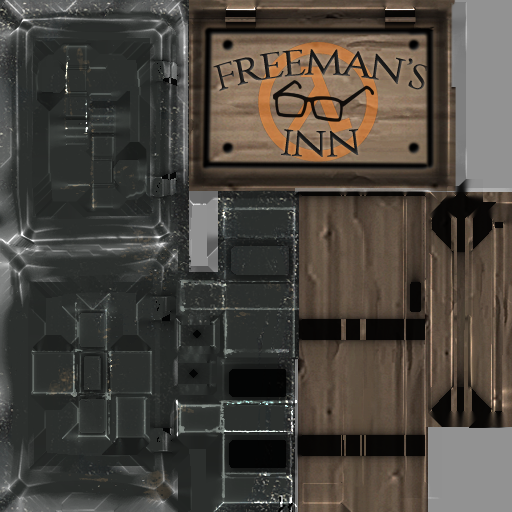
<style>
.page{position:relative;width:512px;height:512px}
.page>*{position:absolute;margin:0}
.t1{font:36px "Constantine";letter-spacing:-0.075em;color:#181818}
</style>
<div class="page">
<p class="t1" style="left:213px;top:49px;width:215px;height:42px">FREEMAN’S</p>
<p class="t1" style="left:281px;top:129px;width:78px;height:28px">INN</p>
</div>
